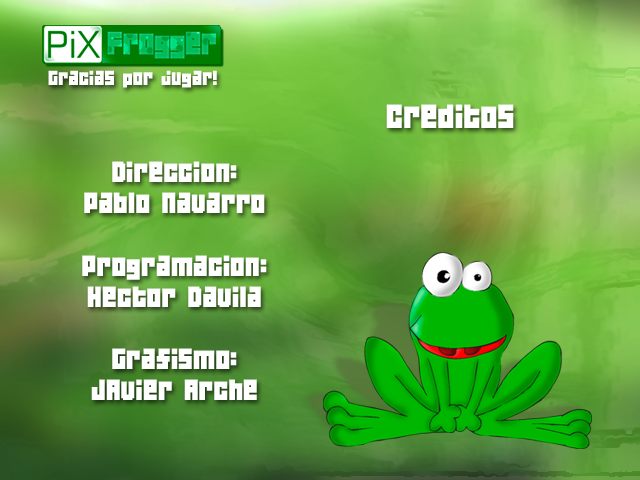
<style>
.page{position:relative;width:640px;height:480px}
.page>*{position:absolute;margin:0}
.t1{font:18px "04b19";color:#ffffff}
.t2{font:30px "04b19";color:#ffffff}
.t3{font:26px "04b19";color:#ffffff}
</style>
<div class="page">
<p class="t1" style="left:48px;top:70px;width:169px;height:18px">Gracias por jugar!</p>
<p class="t2" style="left:386px;top:104px;width:128px;height:24px">Creditos</p>
<p class="t3" style="left:82px;top:161px;width:185px;height:239px;text-align:center">Direccion:<br>Pablo Navarro<br><br>Programacion:<br>Hector Davila<br><br>Grafismo:<br>JAvier Arche</p>
</div>
